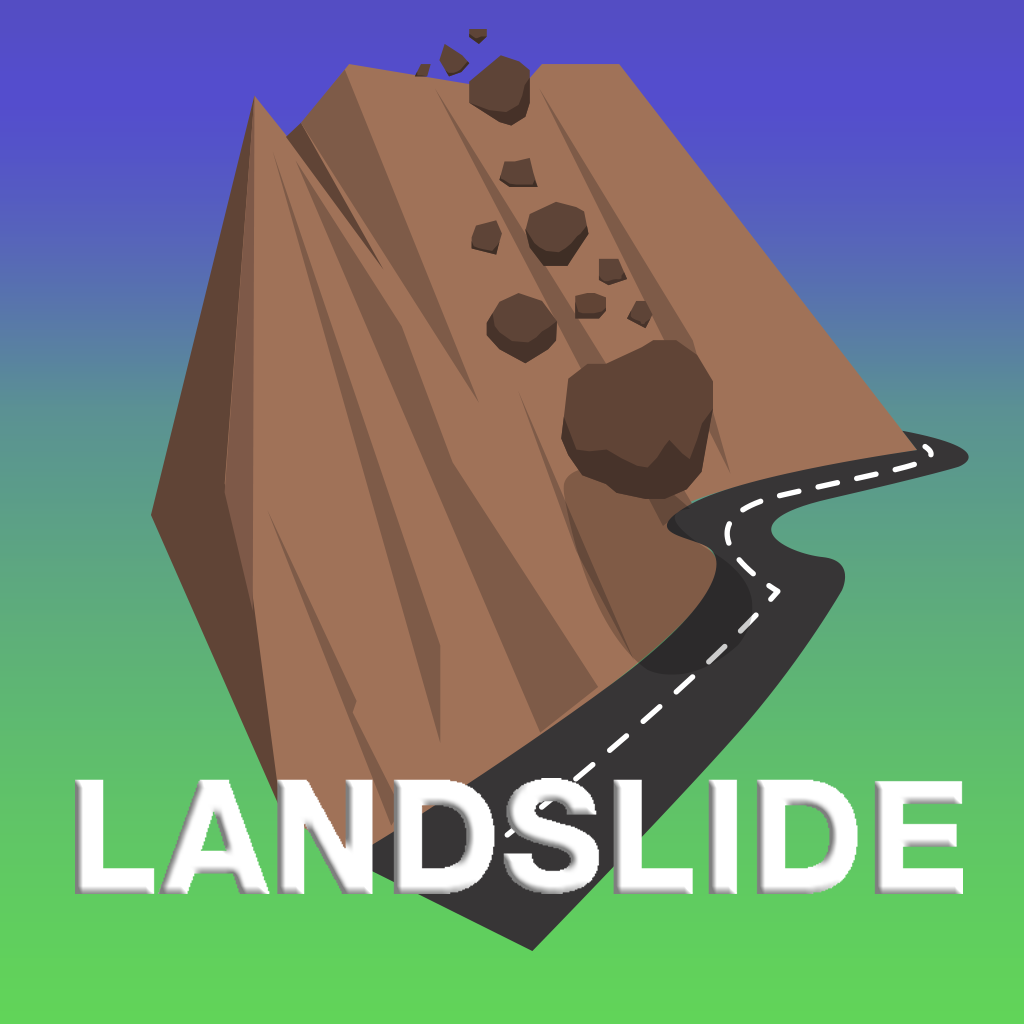
<style>
.page{position:relative;width:1024px;height:1024px;background:#a07258}
.page>*{position:absolute;margin:0}
.t1{font:241.8px "PSLEmpireExtra";color:#ffffff}
</style>
<div class="page">
<p class="t1" style="left:75px;top:778px;width:888px;height:116px">LANDSLIDE</p>
</div>
